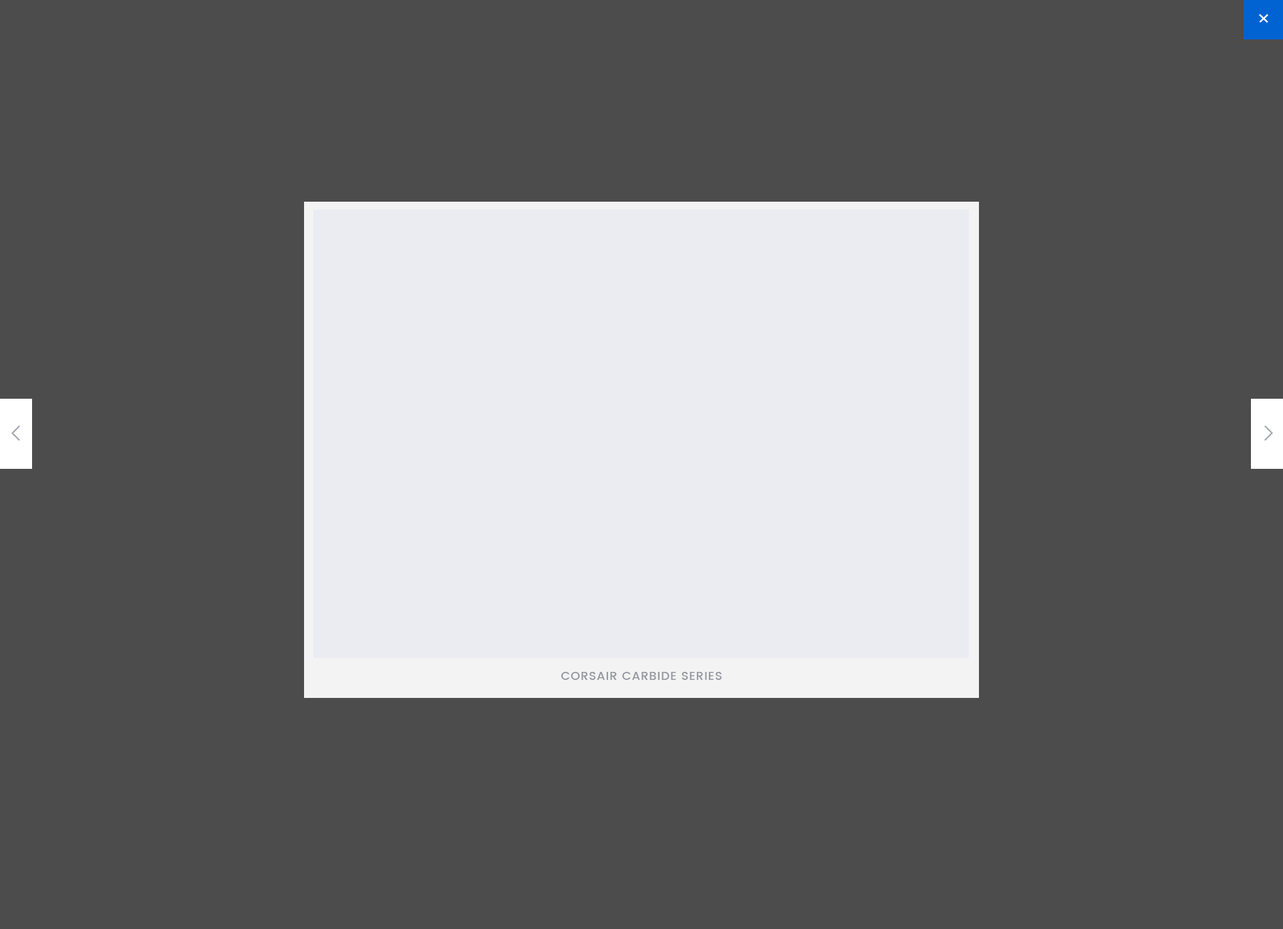
<style>
.page{position:relative;width:1283px;height:929px;background:#4c4c4c}
.page>*{position:absolute;margin:0}
.t1{font:12px "Poppins-Medium";letter-spacing:0.05em;color:#94979f;text-transform:uppercase}
</style>
<div class="page">
<p class="t1" style="left:561px;top:672px;width:161px;height:8px">Corsair Carbide Series</p>
</div>
